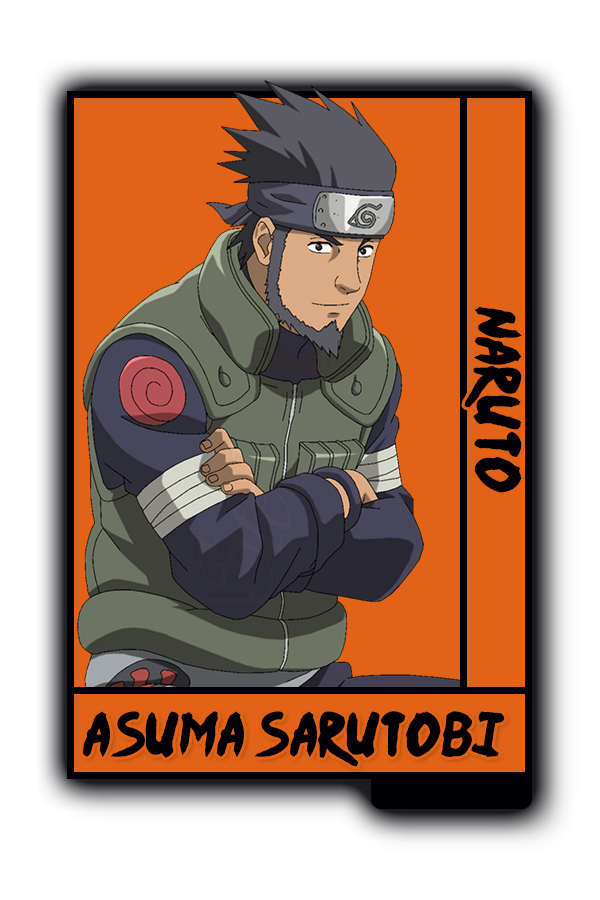
<style>
.page{position:relative;width:600px;height:900px;background:#e26317}
.page>*{position:absolute;margin:0}
.t1{font:52px "Ninja-Naruto";color:#010005}
.t2{font:50.5px "Ninja-Naruto";color:#010005}
</style>
<div class="page">
<p class="t1" style="left:464px;top:307px;width:59px;height:186px;rotate:90deg">Naruto</p>
<p class="t2" style="left:83px;top:711px;width:422px;height:56px">Asuma Sarutobi</p>
</div>
